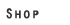
<style>
.page{position:relative;width:70px;height:25px;background:#ffffff}
.page>*{position:absolute;margin:0}
.t1{font:14px "OratorStd";color:#333333;font-weight:bold}
</style>
<div class="page">
<p class="t1" style="left:6px;top:8px;width:33px;height:11px">Shop</p>
</div>
